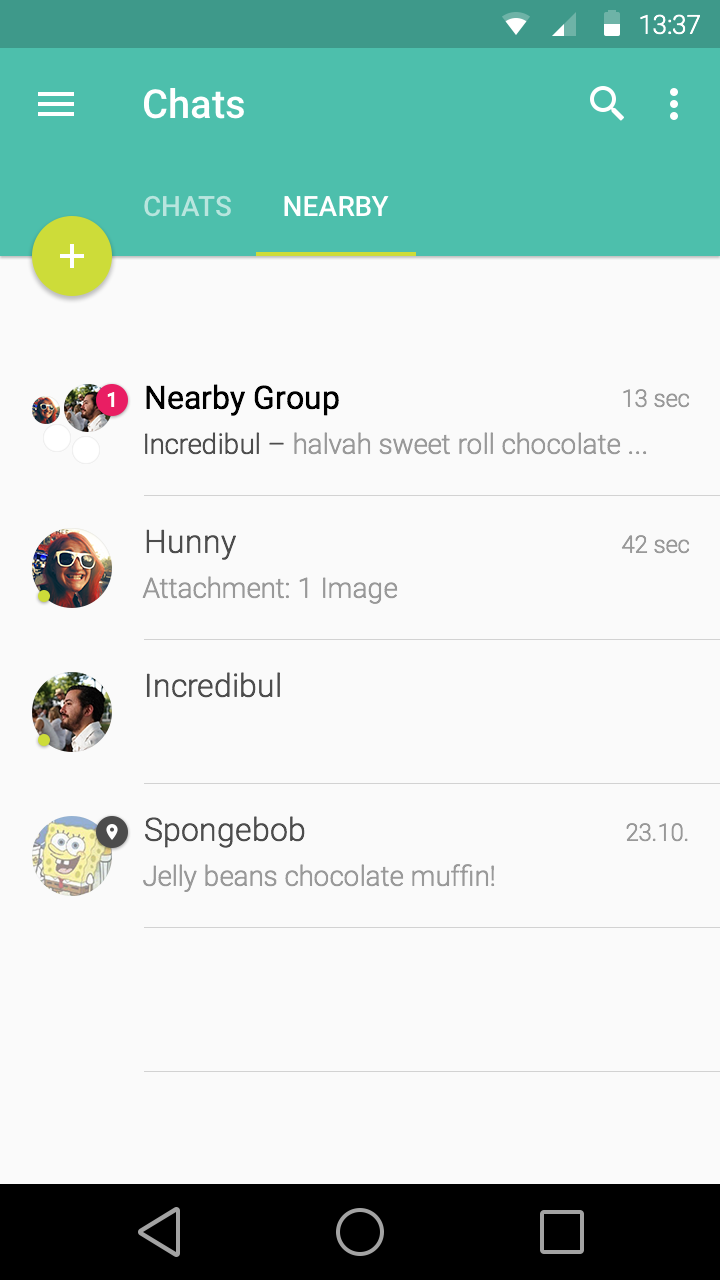
<style>
.page{position:relative;width:720px;height:1280px;background:#fafafa}
.page>*{position:absolute;margin:0}
.t1{font:40px "Roboto-Medium";color:#ffffff}
.t2{font:28px "Roboto-Medium";color:#b8e5de;text-transform:uppercase}
.t3{font:28px "Roboto-Medium";color:#ffffff;text-transform:uppercase}
.t4{font:32px "Roboto-Regular";color:#000000}
.t5{font:24px "Roboto-Light";color:#999999}
.t6{font:20px "Roboto-Medium";color:#ffffff}
.t7{font:28px "Roboto-Light";color:#999999}
.t8{font:28px "Roboto-Light";color:#4d4d4d}
.t9{font:32px "Roboto-Light";color:#4d4d4d}
</style>
<div class="page">
<p class="t1" style="left:144px;top:88px;width:100px;height:31px">Chats</p>
<p class="t2" style="left:144px;top:195px;width:87px;height:22px">Chats</p>
<p class="t3" style="left:284px;top:196px;width:105px;height:20px">Nearby</p>
<p class="t4" style="left:146px;top:384px;width:193px;height:32px">Nearby Group</p>
<p class="t5" style="left:623px;top:389px;width:67px;height:19px">13 sec</p>
<p class="t6" style="left:107px;top:392px;width:8px;height:15px">1</p>
<p class="t7" style="left:145px;top:432px;width:502px;height:23px"><span class="t8">Incredibul –</span> halvah sweet roll chocolate ...</p>
<p class="t9" style="left:146px;top:529px;width:90px;height:31px">Hunny</p>
<p class="t5" style="left:621px;top:535px;width:69px;height:19px">42 sec</p>
<p class="t7" style="left:142px;top:576px;width:256px;height:28px">Attachment: 1 Image</p>
<p class="t9" style="left:146px;top:672px;width:134px;height:26px">Incredibul</p>
<p class="t9" style="left:145px;top:816px;width:160px;height:32px">Spongebob</p>
<p class="t5" style="left:626px;top:823px;width:62px;height:19px">23.10.</p>
<p class="t7" style="left:143px;top:864px;width:352px;height:28px">Jelly beans chocolate muffin!</p>
</div>
